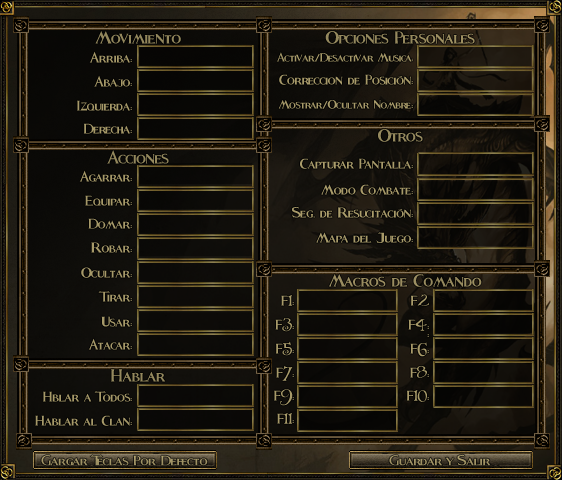
<style>
.page{position:relative;width:562px;height:480px}
.page>*{position:absolute;margin:0}
.t1{font:33.3px "Fleet-Street";color:#93875c;scale:0.94 1}
.t2{font:33.3px "Fleet-Street";color:#96895e;scale:0.94 1}
.t3{font:26.7px "Fleet-Street";color:#a69968;scale:0.94 1}
.t4{font:22.7px "Fleet-Street";color:#a79a69;scale:0.94 1}
.t5{font:26.7px "Fleet-Street";color:#a79a69;scale:0.94 1}
.t6{font:33.3px "Fleet-Street";color:#95895e;scale:0.94 1}
.t7{font:33.3px "Fleet-Street";color:#93885d;scale:0.94 1}
.t8{font:26.7px "Fleet-Street";color:#a89b6a;scale:0.94 1}
.t9{font:26.7px "Fleet-Street";color:#a69969;scale:0.94 1}
.t10{font:26.7px "Fleet-Street";color:#a89a69;scale:0.94 1}
.t11{font:26.7px "Fleet-Street";color:#a99c6b;scale:0.94 1}
.t12{font:33.3px "Fleet-Street";color:#9a8d60;scale:0.94 1}
.t13{font:26.7px "Fleet-Street";color:#ab9c6a;scale:0.94 1}
.t14{font:14.7px "Folkard";color:#ab9c6a;scale:0.94 1}
.t15{font:26.7px "Fleet-Street";color:#a99b6a;scale:0.94 1}
.t16{font:14.7px "Folkard";color:#a99b6a;scale:0.94 1}
.t17{font:26.7px "Fleet-Street";color:#a89a6a;scale:0.94 1}
.t18{font:14.7px "Folkard";color:#a89b6a;scale:0.94 1}
.t19{font:14.7px "Folkard";color:#a79a69;scale:0.94 1}
.t20{font:26.7px "Fleet-Street";color:#a79a6a;scale:0.94 1}
.t21{font:14.7px "Folkard";color:#a89a6a;scale:0.94 1}
.t22{font:26.7px "Fleet-Street";color:#aa9c6a;scale:0.94 1}
.t23{font:14.7px "Folkard";color:#aa9c6a;scale:0.94 1}
.t24{font:26px "Fleet-Street";color:#a19365}
.t25{font:26px "Fleet-Street";color:#a19466}
</style>
<div class="page">
<p class="t1" style="left:95px;top:31px;width:86px;height:13px">Movimiento</p>
<p class="t2" style="left:325px;top:31px;width:150px;height:13px">Opciones Personales</p>
<p class="t3" style="left:89px;top:51px;width:43px;height:12px">Arriba:</p>
<p class="t4" style="left:276px;top:52px;width:137px;height:10px">Activar/Desactivar Musica:</p>
<p class="t3" style="left:94px;top:75px;width:38px;height:12px">Abajo:</p>
<p class="t5" style="left:279px;top:74px;width:134px;height:11px">Correccion de Posición:</p>
<p class="t3" style="left:77px;top:100px;width:55px;height:11px">Izquierda:</p>
<p class="t4" style="left:278px;top:100px;width:135px;height:9px">Mostrar/Ocultar Nombre<span class="t5">:</span></p>
<p class="t3" style="left:83px;top:123px;width:49px;height:11px">Derecha:</p>
<p class="t6" style="left:378px;top:129px;width:45px;height:13px">Otros</p>
<p class="t7" style="left:107px;top:150px;width:62px;height:14px">Acciones</p>
<p class="t8" style="left:300px;top:158px;width:113px;height:11px">Capturar Pantalla:</p>
<p class="t9" style="left:79px;top:170px;width:53px;height:12px">Agarrar:</p>
<p class="t10" style="left:321px;top:184px;width:92px;height:11px">Modo Combate:</p>
<p class="t5" style="left:85px;top:195px;width:47px;height:11px">Equipar:</p>
<p class="t11" style="left:291px;top:206px;width:122px;height:12px">Seg. de Resucitación:</p>
<p class="t5" style="left:88px;top:218px;width:44px;height:11px">Domar:</p>
<p class="t5" style="left:316px;top:232px;width:97px;height:11px">Mapa del Juego:</p>
<p class="t5" style="left:91px;top:242px;width:41px;height:11px">Robar:</p>
<p class="t5" style="left:81px;top:267px;width:51px;height:11px">Ocultar:</p>
<p class="t12" style="left:329px;top:274px;width:153px;height:13px">Macros de Comando</p>
<p class="t5" style="left:98px;top:291px;width:34px;height:11px">Tirar:</p>
<p class="t13" style="left:410px;top:294px;width:19px;height:43px;text-align:right">F<span class="t14">2<br></span>:</p>
<p class="t15" style="left:281px;top:295px;width:13px;height:11px">F<span class="t16">1</span>:</p>
<p class="t17" style="left:101px;top:316px;width:31px;height:11px">Usar:</p>
<p class="t8" style="left:275px;top:317px;width:19px;height:15px">F<span class="t18">3</span>:</p>
<p class="t5" style="left:408px;top:319px;width:21px;height:12px">F<span class="t19">4</span>:</p>
<p class="t20" style="left:88px;top:338px;width:44px;height:12px">Atacar:</p>
<p class="t17" style="left:275px;top:341px;width:19px;height:15px">F<span class="t21">5</span>:</p>
<p class="t22" style="left:410px;top:342px;width:19px;height:15px">F<span class="t23">6</span>:</p>
<p class="t5" style="left:276px;top:365px;width:18px;height:16px">F<span class="t19">7</span>:</p>
<p class="t22" style="left:410px;top:366px;width:19px;height:12px">F<span class="t23">8</span>:</p>
<p class="t6" style="left:111px;top:369px;width:55px;height:13px">Hablar</p>
<p class="t5" style="left:274px;top:389px;width:20px;height:17px">F<span class="t19">9</span>:</p>
<p class="t19" style="left:406px;top:390px;width:23px;height:12px"><span class="t5">F</span>10<span class="t5">:</span></p>
<p class="t5" style="left:43px;top:391px;width:89px;height:11px">Hblar a Todos:</p>
<p class="t19" style="left:277px;top:413px;width:17px;height:11px"><span class="t5">F</span>11<span class="t5">:</span></p>
<p class="t5" style="left:35px;top:415px;width:97px;height:11px">Hablar al Clan:</p>
<p class="t24" style="left:41px;top:455px;width:167px;height:11px">Gargar Teclas Por Defecto</p>
<p class="t25" style="left:389px;top:455px;width:102px;height:11px">Guardar y Salir</p>
</div>
